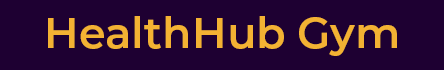
<style>
.page{position:relative;width:444px;height:70px;background:#1e0032}
.page>*{position:absolute;margin:0}
.t1{font:43px "Montserrat-SemiBold";color:#f3b233}
</style>
<div class="page">
<p class="t1" style="left:48px;top:16px;width:349px;height:40px">HealthHub Gym</p>
</div>
